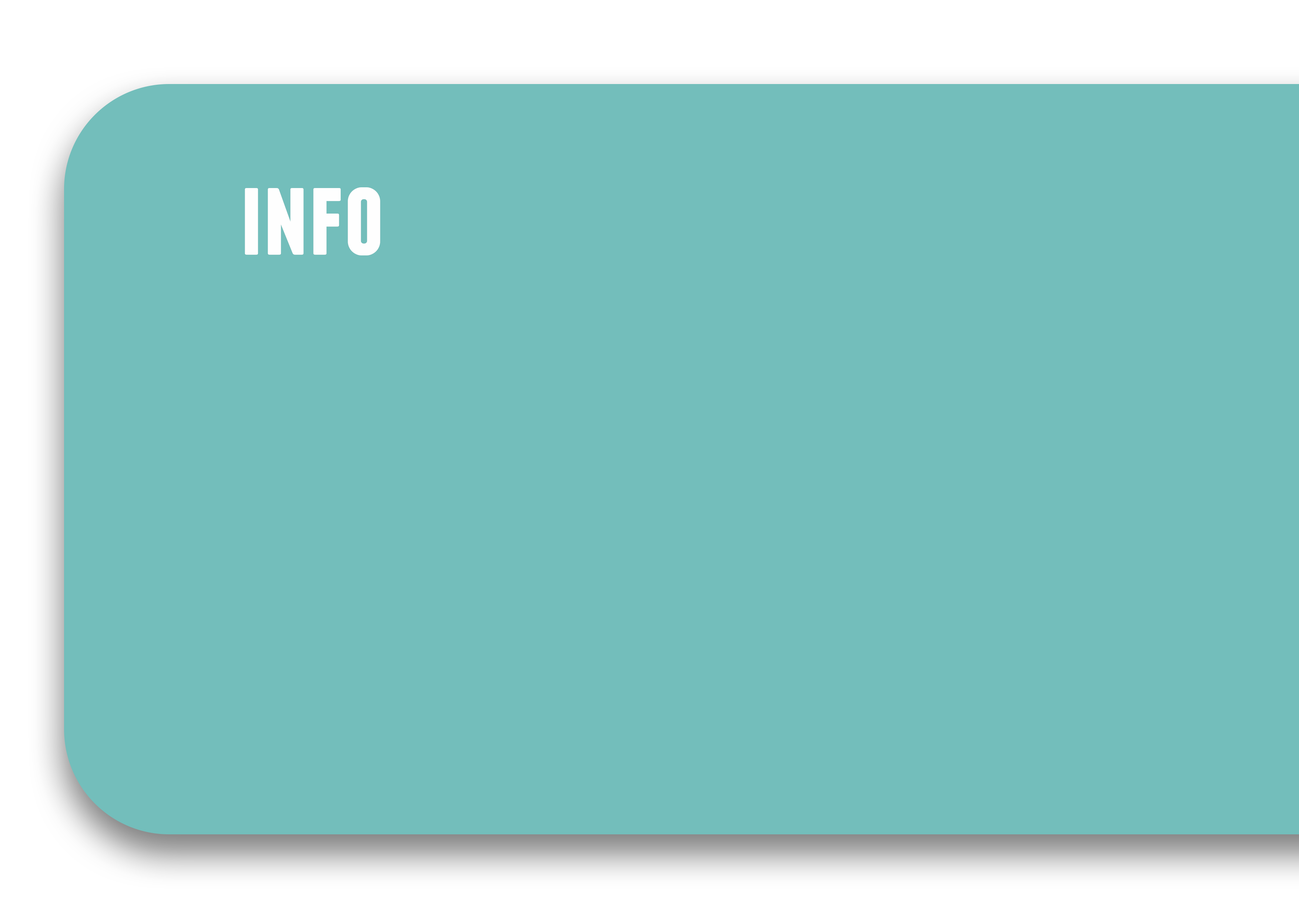
<style>
.page{position:relative;width:1299px;height:918px;background:#73bebb}
.page>*{position:absolute;margin:0}
.t1{font:111.1px "Franchise-Bold";color:#fefefe}
</style>
<div class="page">
<p class="t1" style="left:245px;top:187px;width:135px;height:68px">info</p>
</div>
